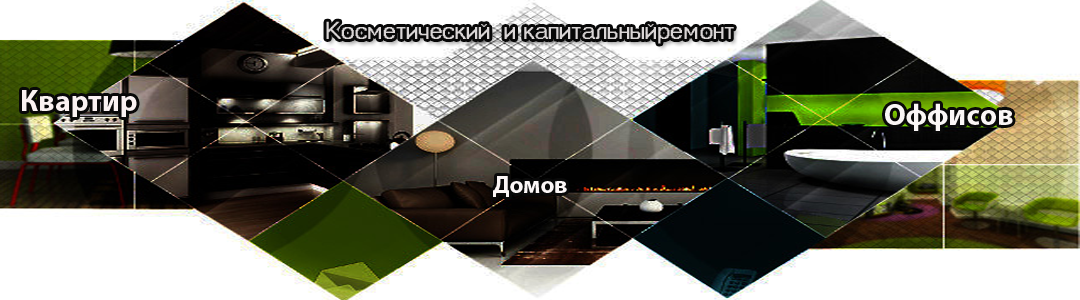
<style>
.page{position:relative;width:1080px;height:300px;background:#ffffff}
.page>*{position:absolute;margin:0}
.t1{font:24px "MS Sans Serif";color:#dad6d6}
.t2{font:30px "MyriadPro-Bold";color:#faf2f2}
.t3{font:30px "MyriadPro-Bold";color:#faf6f6}
.t4{font:24px "MyriadPro-Bold";color:#fcf7f7}
</style>
<div class="page">
<p class="t1" style="left:326px;top:21px;width:408px;height:23px">Косметический  и капитальныйремонт</p>
<p class="t2" style="left:22px;top:90px;width:115px;height:27px">Квартир</p>
<p class="t3" style="left:885px;top:103px;width:128px;height:28px">Оффисов</p>
<p class="t4" style="left:493px;top:176px;width:74px;height:21px">Домов</p>
</div>
